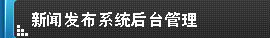
<style>
.page{position:relative;width:270px;height:38px}
.page>*{position:absolute;margin:0}
.t1{font:16px "SimHei";letter-spacing:0.05em;color:#ffffff}
</style>
<div class="page">
<p class="t1" style="left:32px;top:12px;width:165px;height:15px">新闻发布系统后台管理</p>
</div>
